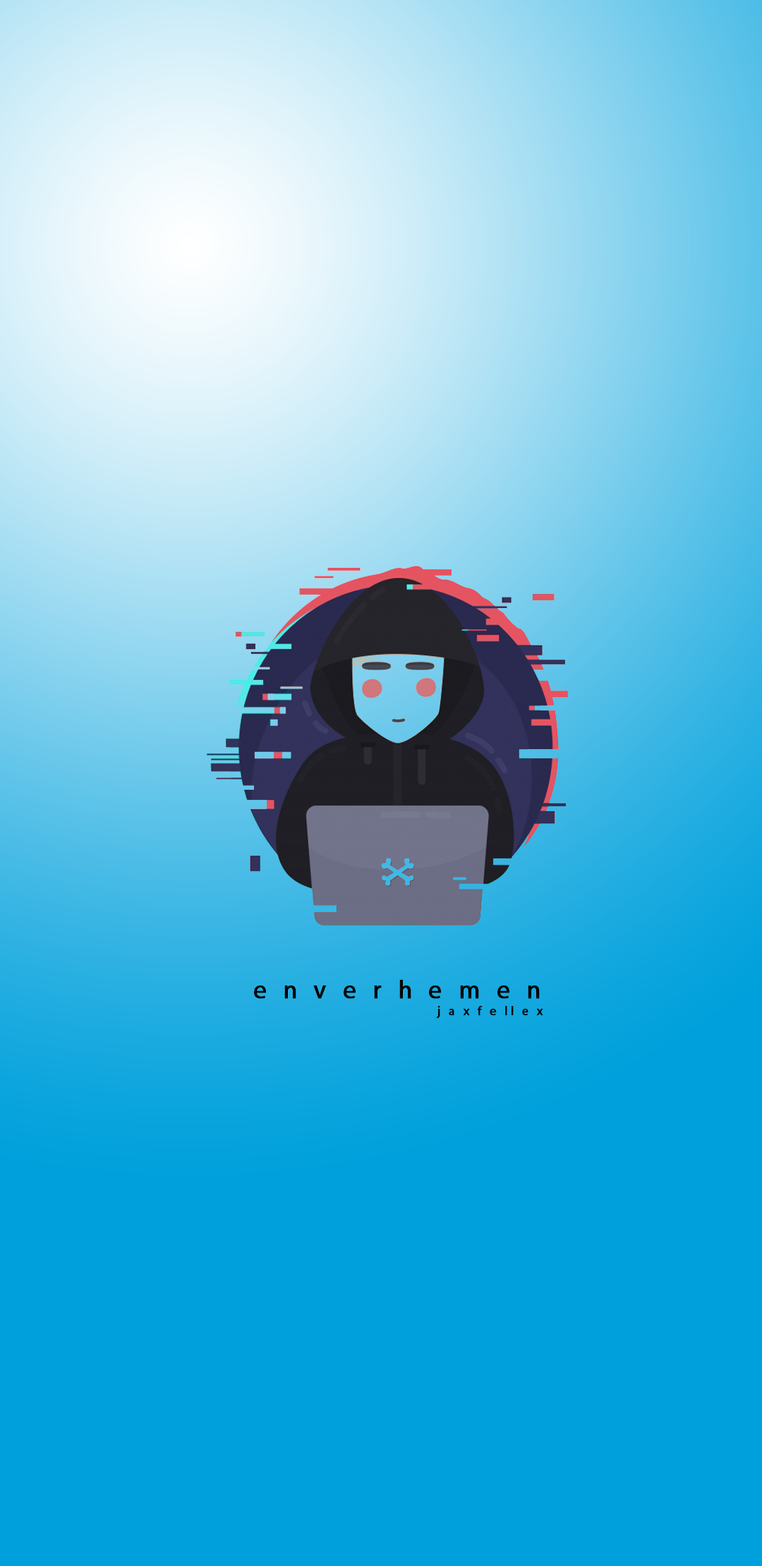
<style>
.page{position:relative;width:762px;height:1566px;background:#00a0dc}
.page>*{position:absolute;margin:0}
.t1{font:25.4px "MyriadPro-Regular";letter-spacing:0.2em;color:#000000;font-weight:bold}
.t2{font:12.7px "MyriadPro-Regular";letter-spacing:0.2em;color:#000000;font-weight:bold}
</style>
<div class="page">
<p class="t1" style="left:254px;top:980px;width:285px;height:19px">e n v e r h e m e n</p>
<p class="t2" style="left:436px;top:1006px;width:107px;height:12px">j a x f e ll e x</p>
</div>
